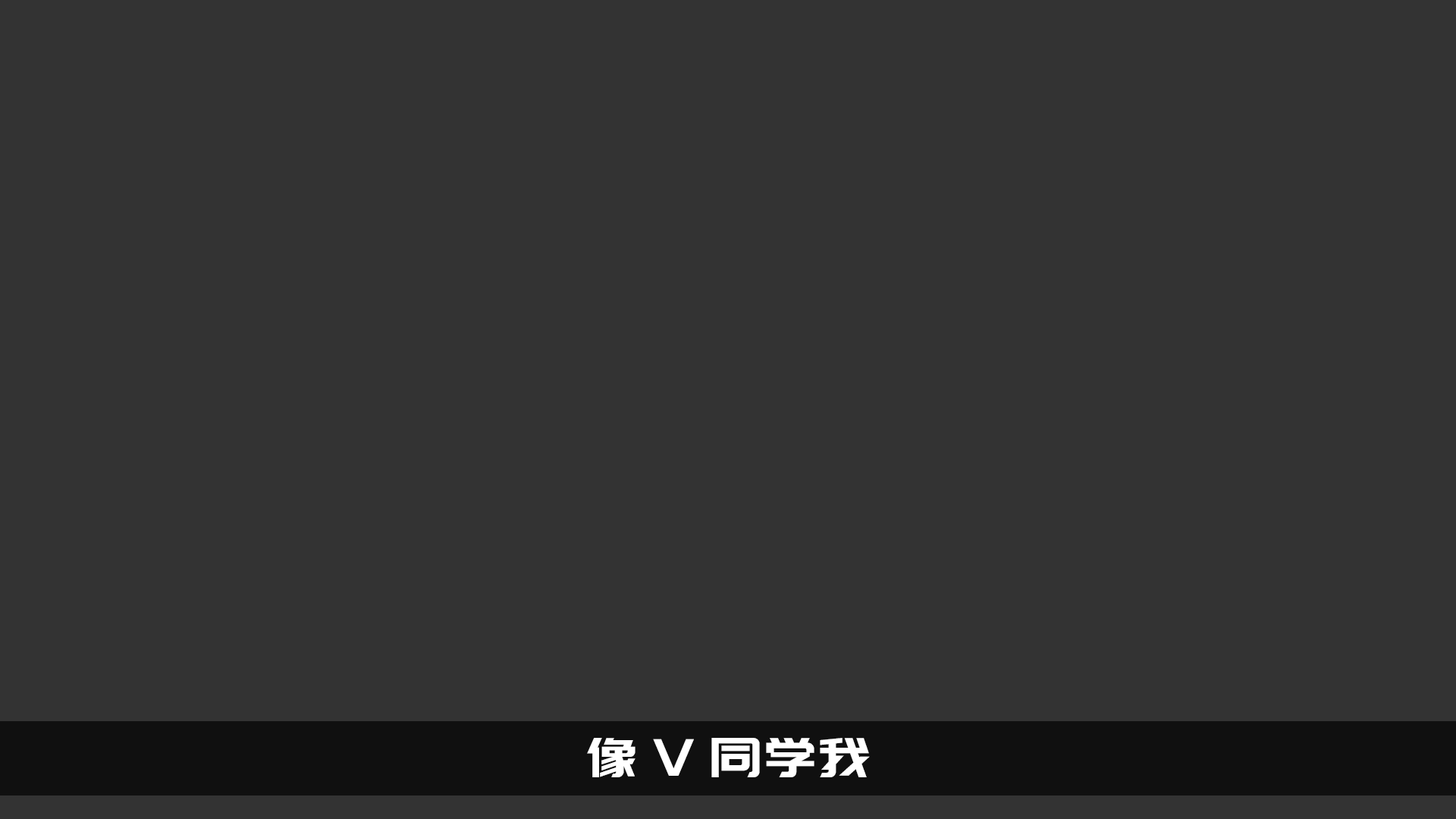
<style>
.page{position:relative;width:1456px;height:819px;background:#333333}
.page>*{position:absolute;margin:0}
.t1{font:54.6px "PangMenZhengDao-3";color:#ffffff}
</style>
<div class="page">
<p class="t1" style="left:587px;top:738px;width:283px;height:39px">像V同学我</p>
</div>
